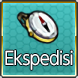
<style>
.page{position:relative;width:78px;height:78px}
.page>*{position:absolute;margin:0}
.t1{font:18px "UDShinGoPro-Regular";letter-spacing:-0.04em;color:#ffffff;scale:0.9 1}
</style>
<div class="page">
<p class="t1" style="left:5px;top:50px;width:68px;height:20px">Ekspedisi</p>
</div>
